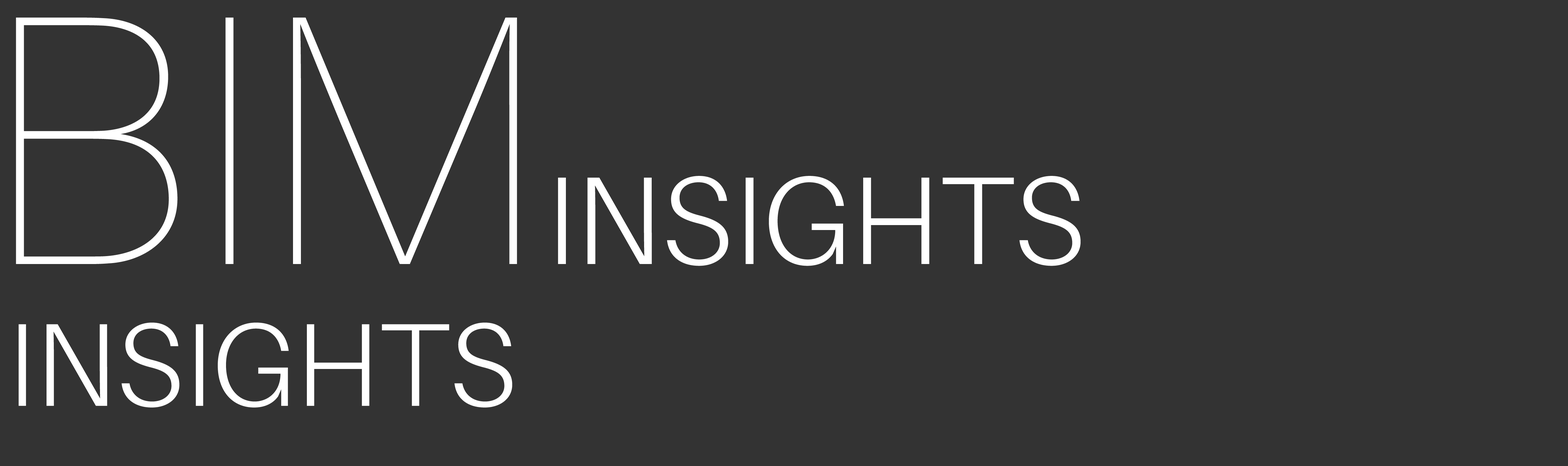
<style>
.page{position:relative;width:1568px;height:466px;background:#333333}
.page>*{position:absolute;margin:0}
.t1{font:118.1px "Aileron-Light";color:#ffffff}
.t2{font:357px "Aileron-UltraLight";color:#ffffff}
.t3{font:125.1px "Aileron-Light";color:#ffffff}
</style>
<div class="page">
<p class="t1" style="left:16px;top:17px;width:501px;height:391px;text-align:center"><span class="t2">BIM<br></span>INSIGHTS</p>
<p class="t3" style="left:558px;top:176px;width:523px;height:90px">INSIGHTS</p>
</div>
